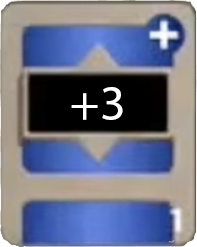
<style>
.page{position:relative;width:197px;height:247px}
.page>*{position:absolute;margin:0}
.t1{font:50px "MyriadPro-Regular";color:#ffffff}
</style>
<div class="page">
<p class="t1" style="left:71px;top:87px;width:52px;height:33px">+3</p>
</div>
